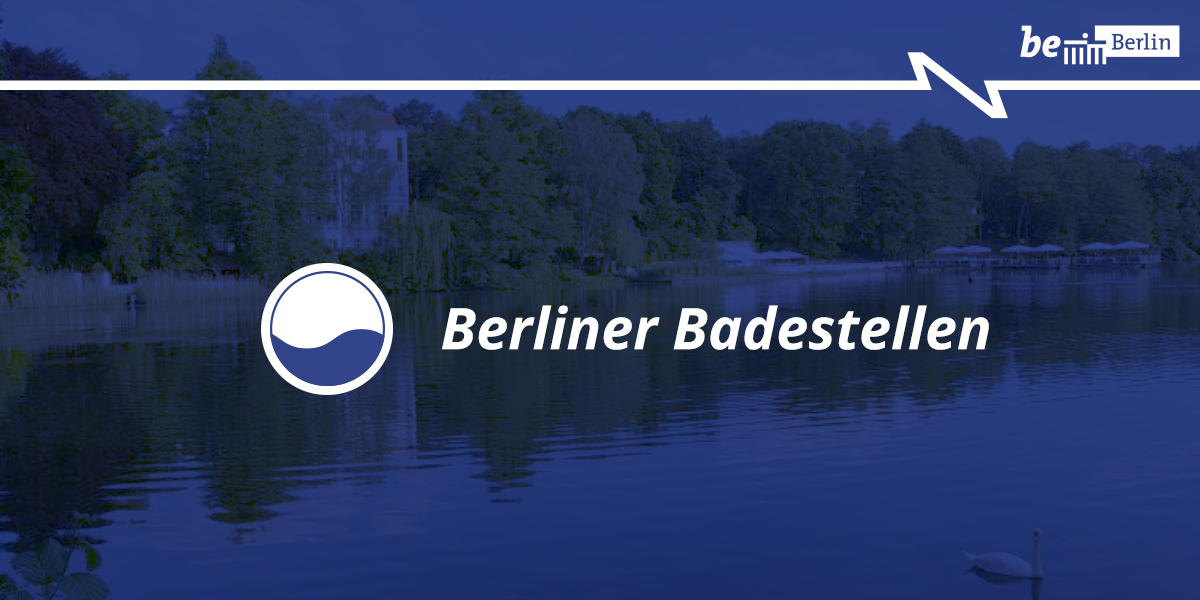
<style>
.page{position:relative;width:1200px;height:600px}
.page>*{position:absolute;margin:0}
.t1{font:57.5px "OpenSans-BoldItalic";color:#ffffff}
</style>
<div class="page">
<p class="t1" style="left:442px;top:305px;width:547px;height:45px">Berliner Badestellen</p>
</div>
